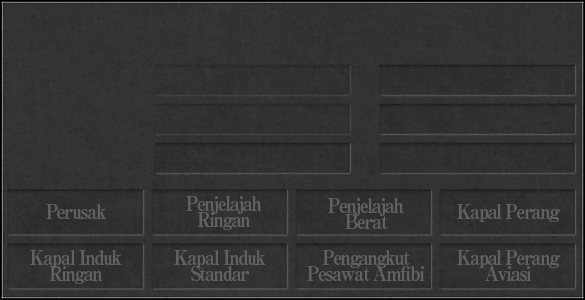
<style>
.page{position:relative;width:585px;height:300px}
.page>*{position:absolute;margin:0}
.t1{font:20px/16px "RyuminPro-ExBold";letter-spacing:-0.08em;color:#656463;scale:0.9 1}
.t2{font:20px "RyuminPro-ExBold";letter-spacing:-0.08em;color:#656463;scale:0.9 1}
</style>
<div class="page">
<p class="t1" style="left:186px;top:196px;width:76px;height:34px;text-align:center">Penjelajah<br>Ringan</p>
<p class="t1" style="left:328px;top:198px;width:76px;height:31px;text-align:center">Penjelajah<br>Berat</p>
<p class="t2" style="left:46px;top:204px;width:60px;height:16px">Perusak</p>
<p class="t2" style="left:457px;top:204px;width:103px;height:18px">Kapal Perang</p>
<p class="t1" style="left:30px;top:250px;width:92px;height:34px;text-align:center">Kapal Induk<br>Ringan</p>
<p class="t1" style="left:174px;top:250px;width:92px;height:31px;text-align:center">Kapal Induk<br>Standar</p>
<p class="t1" style="left:307px;top:250px;width:118px;height:32px;text-align:center">Pengangkut<br>Pesawat Amfibi</p>
<p class="t1" style="left:457px;top:250px;width:103px;height:32px;text-align:center">Kapal Perang<br>Aviasi</p>
</div>
